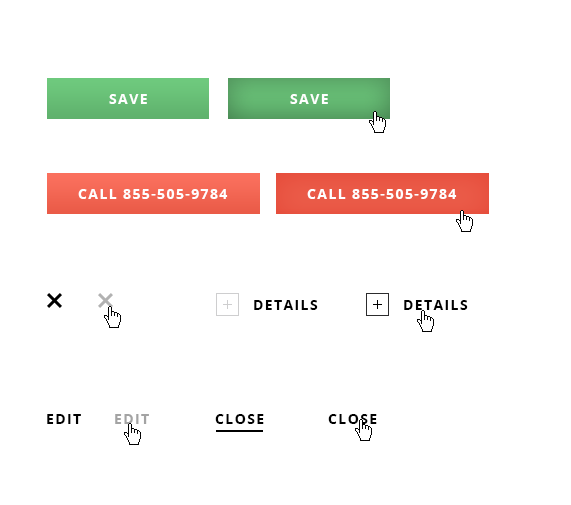
<style>
.page{position:relative;width:571px;height:505px;background:#ffffff}
.page>*{position:absolute;margin:0}
.t1{font:14px "OpenSans-Bold";letter-spacing:0.1em;color:#ffffff;text-transform:uppercase}
.t2{font:14px "OpenSans-Bold";letter-spacing:0.1em;color:#000000;text-transform:uppercase}
.t3{font:14px "OpenSans-Bold";letter-spacing:0.1em;color:#a3a3a3;text-transform:uppercase}
</style>
<div class="page">
<p class="t1" style="left:109px;top:94px;width:38px;height:10px">save</p>
<p class="t1" style="left:290px;top:94px;width:38px;height:10px">save</p>
<p class="t1" style="left:78px;top:189px;width:150px;height:10px">call 855-505-9784</p>
<p class="t1" style="left:307px;top:189px;width:150px;height:10px">call 855-505-9784</p>
<p class="t2" style="left:254px;top:300px;width:64px;height:10px">details</p>
<p class="t2" style="left:404px;top:300px;width:64px;height:10px">details</p>
<p class="t2" style="left:47px;top:414px;width:34px;height:10px">edit</p>
<p class="t3" style="left:115px;top:414px;width:34px;height:10px">edit</p>
<p class="t2" style="left:215px;top:414px;width:49px;height:10px">close</p>
<p class="t2" style="left:328px;top:414px;width:49px;height:10px">close</p>
</div>
